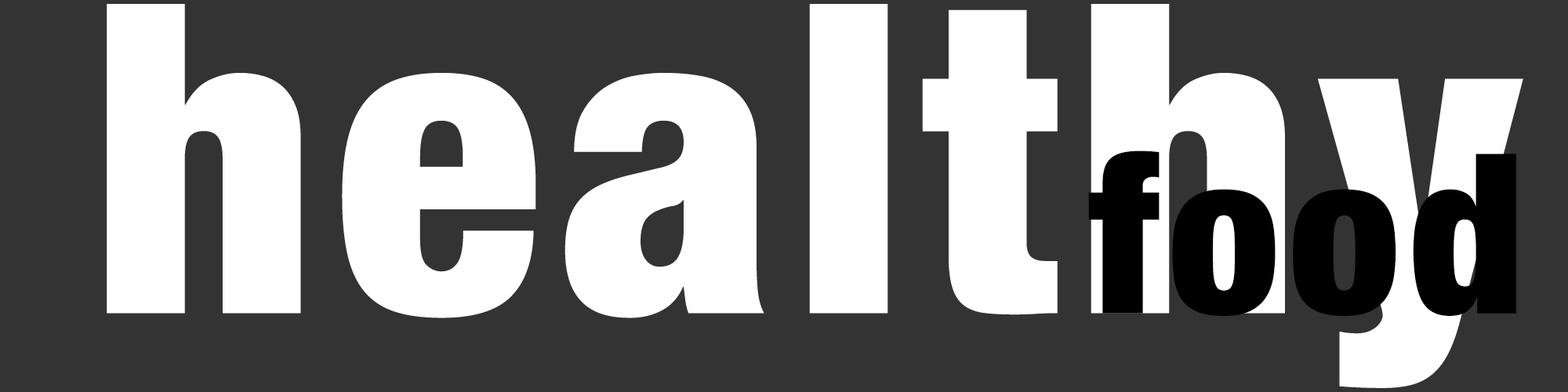
<style>
.page{position:relative;width:1568px;height:392px;background:#333333}
.page>*{position:absolute;margin:0}
.t1{font:432.9px "HelveticaNeue-CondensedBlack";letter-spacing:0.04em;color:#ffffff}
.t2{font:223.1px "HelveticaNeue-CondensedBlack";letter-spacing:0.04em;color:#000000}
</style>
<div class="page">
<p class="t1" style="left:107px;top:4px;width:1416px;height:384px">healthy</p>
<p class="t2" style="left:1088px;top:151px;width:428px;height:165px">food</p>
</div>
